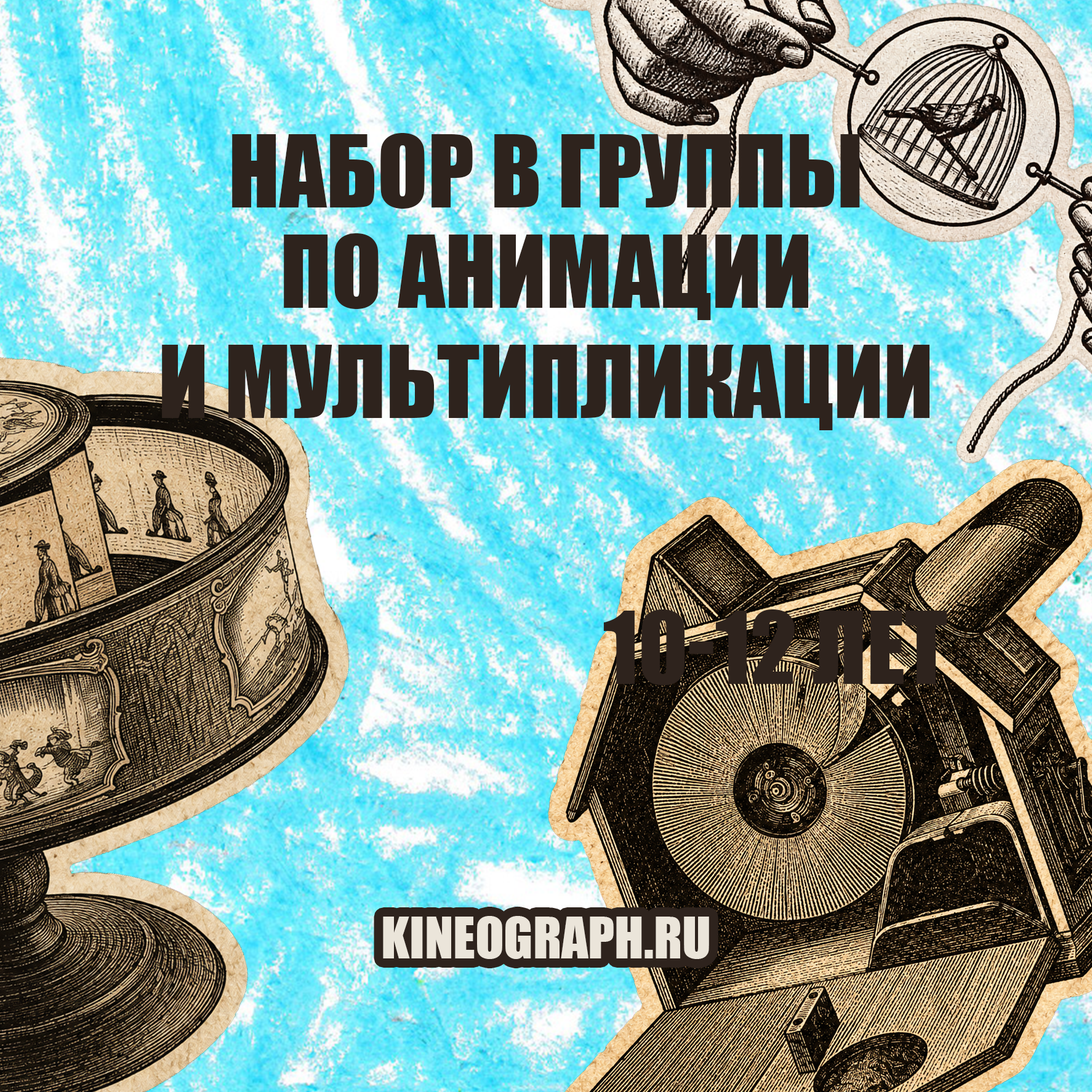
<style>
.page{position:relative;width:1092px;height:1092px}
.page>*{position:absolute;margin:0}
.t1{font:92.3px "Impact";color:#2e231d;text-transform:uppercase}
.t2{font:52.8px "Impact";color:#ebe5da;text-transform:uppercase}
</style>
<div class="page">
<p class="t1" style="left:232px;top:133px;width:628px;height:76px">Набор в группы</p>
<p class="t1" style="left:284px;top:233px;width:524px;height:87px">по анимации</p>
<p class="t1" style="left:162px;top:345px;width:767px;height:85px">и мультипликации</p>
<p class="t1" style="left:603px;top:609px;width:344px;height:76px">10-12 лет</p>
<p class="t2" style="left:383px;top:916px;width:326px;height:43px">kineograph.ru</p>
</div>
